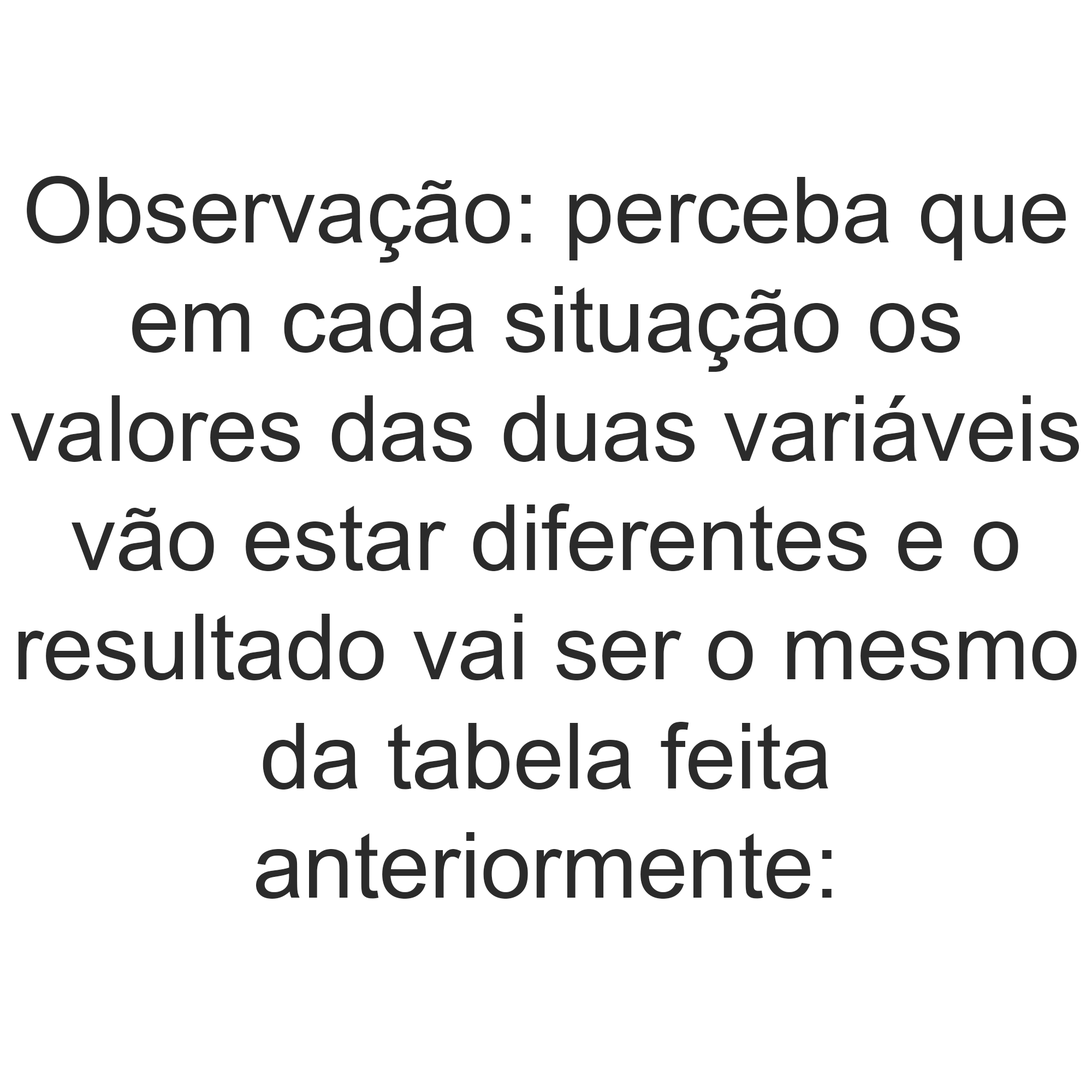
<style>
.page{position:relative;width:1092px;height:1092px;background:#ffffff}
.page>*{position:absolute;margin:0}
.t1{font:91px "ArialMT";color:#2b2b2b}
</style>
<div class="page">
<p class="t1" style="left:11px;top:176px;width:1068px;height:723px;text-align:center">Observação: perceba que<br>em cada situação os<br>valores das duas variáveis<br>vão estar diferentes e o<br>resultado vai ser o mesmo<br>da tabela feita<br>anteriormente:</p>
</div>
